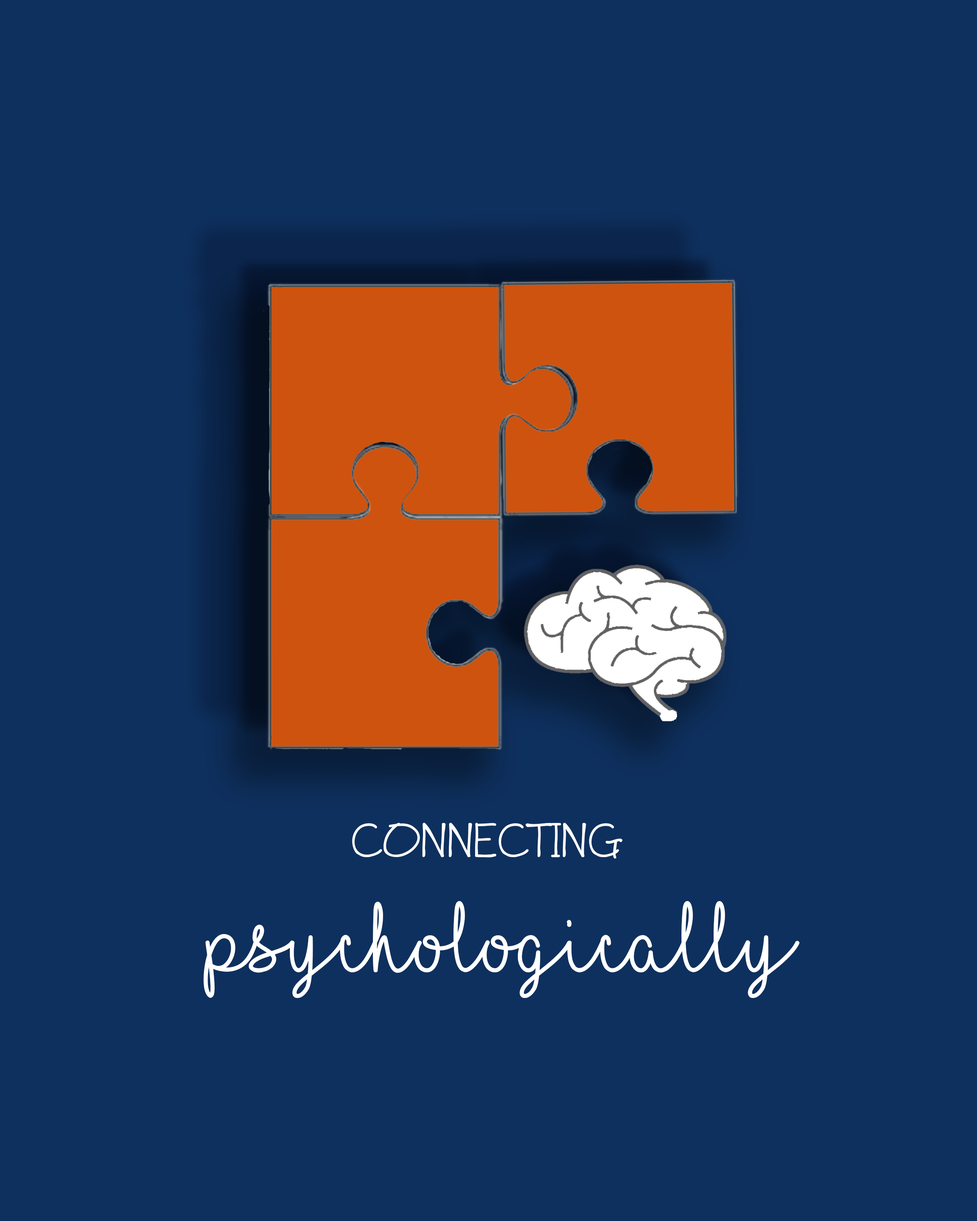
<style>
.page{position:relative;width:977px;height:1221px;background:#0e305e}
.page>*{position:absolute;margin:0}
.t1{font:61px "ASensibleArmadillo";color:#ffffff}
.t2{font:101.7px "ILoveGlitter";color:#ffffff}
</style>
<div class="page">
<p class="t1" style="left:352px;top:822px;width:270px;height:37px">CONNECTING</p>
<p class="t2" style="left:203px;top:901px;width:596px;height:97px">PSYCHOLOGICALLY</p>
</div>
